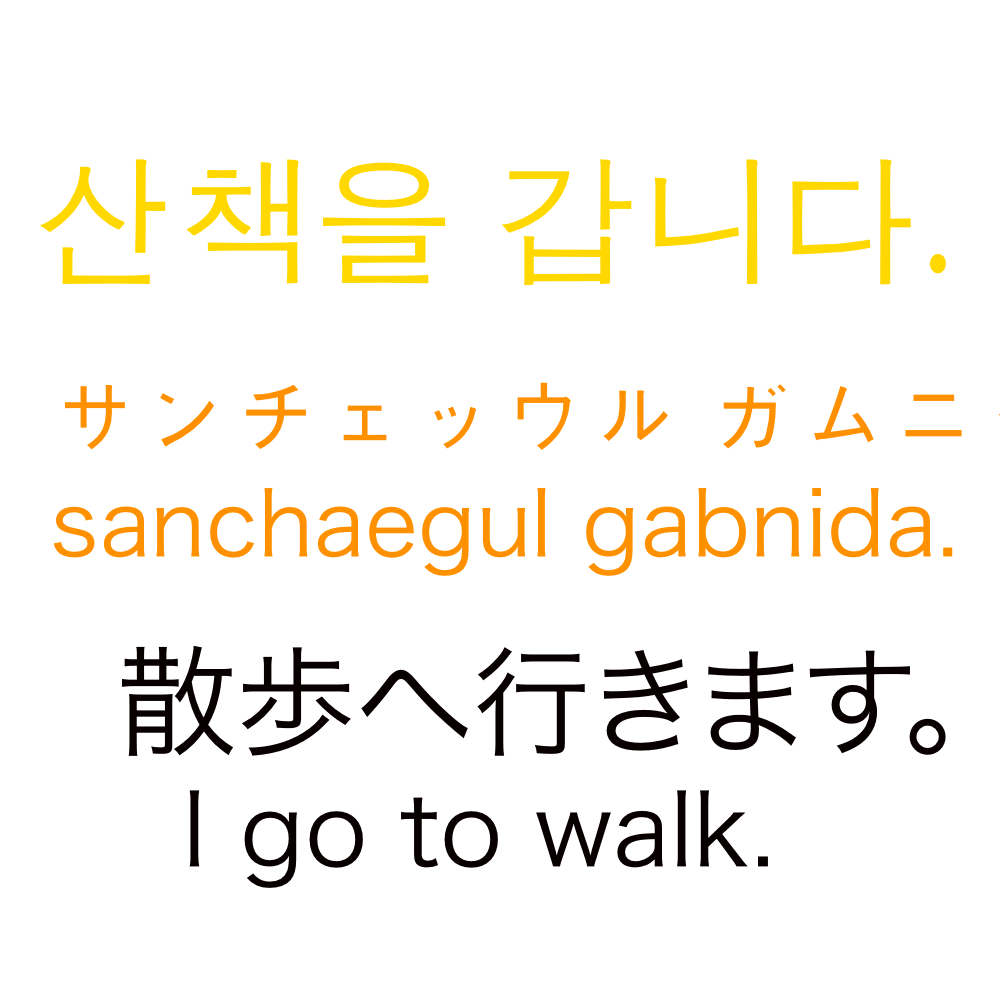
<style>
.page{position:relative;width:1000px;height:1000px;background:#ffffff}
.page>*{position:absolute;margin:0}
.t1{font:140px "AppleGothic";color:#ffd800}
.t2{font:100px "HiraKakuProN-W3";color:#080000}
.t3{font:120px "HiraKakuProN-W3";color:#080000}
</style>
<div class="page">
<p class="t1" style="left:40px;top:159px;width:906px;height:127px">산책을 갑니다.</p>
<p class="t2" style="left:122px;top:645px;width:824px;height:243px"><span class="t3">散歩へ行きます。<br></span>  I go to walk.</p>
</div>
